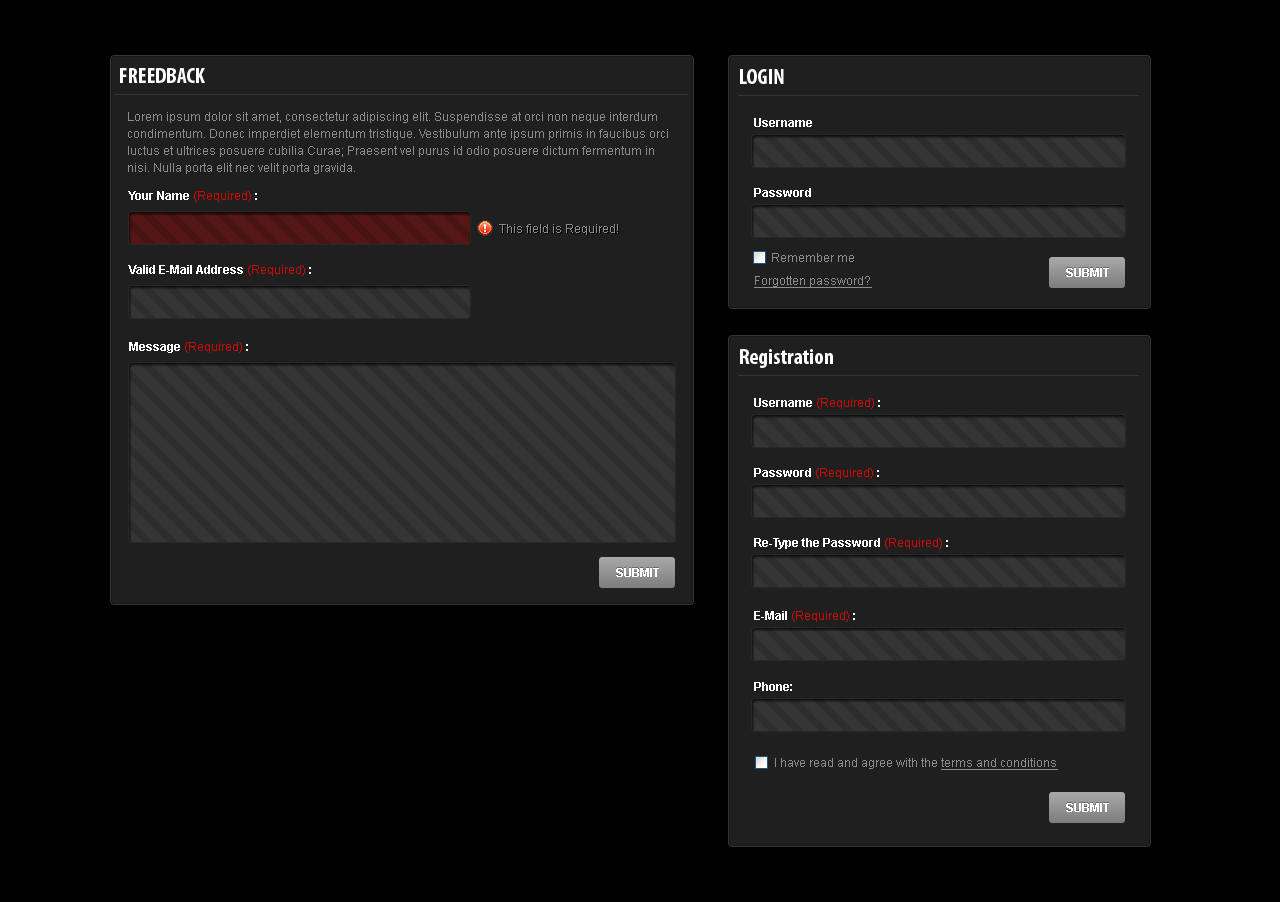
<style>
.page{position:relative;width:1280px;height:902px;background:#000000}
.page>*{position:absolute;margin:0}
.t1{font:22px "MyriadPro-BoldCond";color:#ffffff}
.t2{font:12px/17px "ArialMT";color:#8c8c8c}
.t3{font:12px "Arial-BoldMT";color:#ffffff}
.t4{font:12px "ArialMT";color:#d20000}
.t5{font:12px "ArialMT";color:#8c8c8c}
.t6{font:12px "ArialMT";color:#8c8c8c;text-decoration:underline}
</style>
<div class="page">
<p class="t1" style="left:120px;top:68px;width:85px;height:15px">FREEDBACK</p>
<p class="t1" style="left:740px;top:69px;width:44px;height:15px">LOGIN</p>
<p class="t2" style="left:128px;top:112px;width:540px;height:62px">Lorem ipsum dolor sit amet, consectetur adipiscing elit. Suspendisse at orci non neque interdum condimentum. Donec imperdiet elementum tristique. Vestibulum ante ipsum primis in faucibus orci luctus et ultrices posuere cubilia Curae; Praesent vel purus id odio posuere dictum fermentum in nisi. Nulla porta elit nec velit porta gravida.</p>
<p class="t3" style="left:754px;top:118px;width:58px;height:9px">Username</p>
<p class="t4" style="left:128px;top:191px;width:129px;height:11px"><span class="t3">Your Name </span>(Required) <span class="t3">:</span></p>
<p class="t3" style="left:754px;top:188px;width:57px;height:9px">Password</p>
<p class="t5" style="left:499px;top:224px;width:119px;height:11px">This field is Required!</p>
<p class="t5" style="left:772px;top:253px;width:82px;height:9px">Remember me</p>
<p class="t3" style="left:128px;top:265px;width:183px;height:11px">Valid E-Mail Address <span class="t4">(Required) </span>:</p>
<p class="t3" style="left:1066px;top:268px;width:43px;height:9px">SUBMIT</p>
<p class="t6" style="left:754px;top:276px;width:118px;height:12px">Forgotten password?</p>
<p class="t4" style="left:129px;top:342px;width:119px;height:11px"><span class="t3">Message </span>(Required) <span class="t3">:</span></p>
<p class="t1" style="left:740px;top:349px;width:93px;height:19px">Registration</p>
<p class="t4" style="left:754px;top:398px;width:126px;height:11px"><span class="t3">Username </span>(Required) <span class="t3">:</span></p>
<p class="t4" style="left:754px;top:468px;width:125px;height:11px"><span class="t3">Password </span>(Required) <span class="t3">:</span></p>
<p class="t3" style="left:754px;top:538px;width:194px;height:11px">Re-Type the Password <span class="t4">(Required) </span>:</p>
<p class="t3" style="left:616px;top:568px;width:43px;height:9px">SUBMIT</p>
<p class="t4" style="left:754px;top:611px;width:101px;height:11px"><span class="t3">E-Mail </span>(Required) <span class="t3">:</span></p>
<p class="t3" style="left:754px;top:682px;width:38px;height:9px">Phone:</p>
<p class="t5" style="left:775px;top:758px;width:283px;height:12px">I have read and agree with the <span class="t6">terms and conditions</span></p>
<p class="t3" style="left:1066px;top:803px;width:43px;height:9px">SUBMIT</p>
</div>
